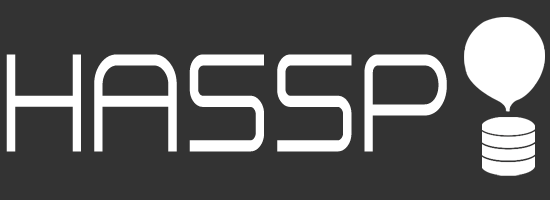
<style>
.page{position:relative;width:550px;height:200px;background:#333333}
.page>*{position:absolute;margin:0}
.t1{font:140px "aspace";color:#ffffff;scale:0.75 1}
</style>
<div class="page">
<p class="t1" style="left:6px;top:54px;width:441px;height:98px">HASSP</p>
</div>
